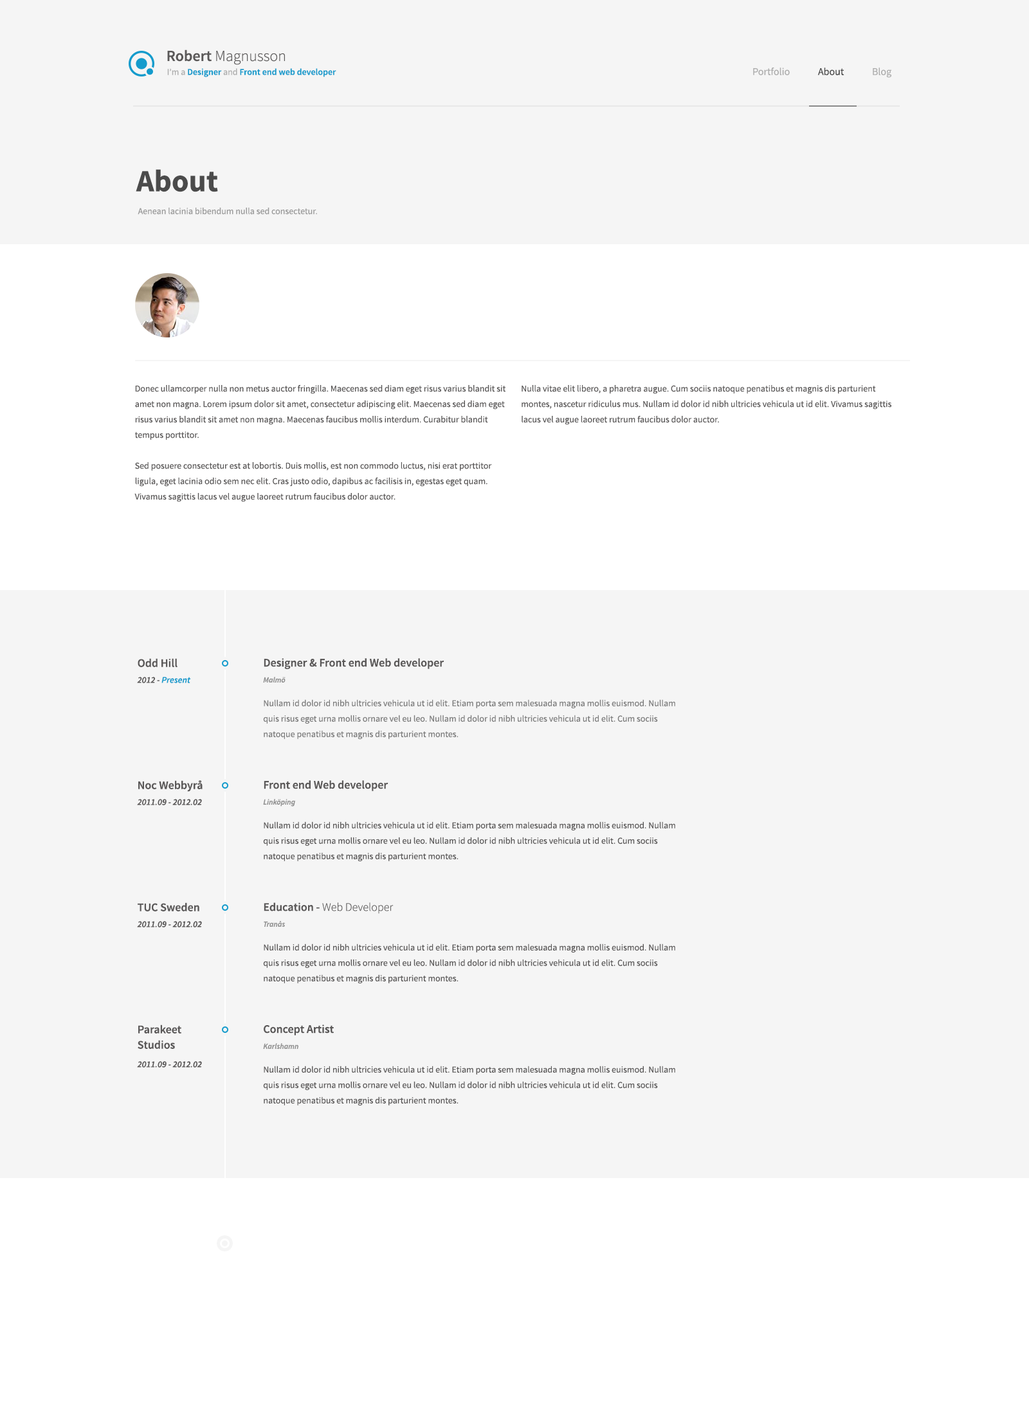
<style>
.page{position:relative;width:1029px;height:1414px;background:#f5f5f5}
.page>*{position:absolute;margin:0}
.t1{font:15.4px "SourceSansPro-Light";color:#5a5858}
.t2{font:15.4px "SourceSansPro-Semibold";color:#5a5858}
.t3{font:9px "SourceSansPro-Semibold";color:#149bcc}
.t4{font:9px "SourceSansPro-Regular";color:#adadad}
.t5{font:10.3px "SourceSansPro-Regular";color:#adadad}
.t6{font:10.3px "SourceSansPro-Regular";color:#4b4b4b}
.t7{font:30.9px "SourceSansPro-Bold";color:#4c4c4c}
.t8{font:9px "SourceSansPro-Regular";color:#9a9a9a}
.t9{font:9px/15.4px "SourceSansPro-Regular";color:#5a5858}
.t10{font:11.6px "SourceSansPro-Semibold";color:#5a5858}
.t11{font:9px "SourceSansPro-SemiboldIt";color:#149bcc}
.t12{font:9px "SourceSansPro-SemiboldIt";color:#5a5858}
.t13{font:7.7px "SourceSansPro-SemiboldIt";color:#909090}
.t14{font:9px/15.4px "SourceSansPro-Regular";color:#7b7b7b}
.t15{font:9px "SourceSansPro-SemiboldIt";color:#565454}
.t16{font:11.6px "SourceSansPro-Light";color:#5a5858}
.t17{font:11.6px/15.4px "SourceSansPro-Semibold";color:#5a5858}
</style>
<div class="page">
<p class="t1" style="left:167px;top:50px;width:118px;height:15px"><span class="t2">Robert </span>Magnusson</p>
<p class="t3" style="left:167px;top:68px;width:169px;height:9px"><span class="t4">I’m a </span>Designer<span class="t4"> and </span>Front end web developer</p>
<p class="t5" style="left:753px;top:68px;width:36px;height:7px">Portfolio</p>
<p class="t6" style="left:817px;top:68px;width:27px;height:7px">About</p>
<p class="t5" style="left:872px;top:68px;width:19px;height:10px">Blog</p>
<p class="t7" style="left:136px;top:169px;width:82px;height:23px">About</p>
<p class="t8" style="left:138px;top:208px;width:179px;height:7px">Aenean lacinia bibendum nulla sed consectetur.</p>
<p class="t9" style="left:134px;top:385px;width:372px;height:117px">Donec ullamcorper nulla non metus auctor fringilla. Maecenas sed diam eget risus varius blandit sit amet non magna. Lorem ipsum dolor sit amet, consectetur adipiscing elit. Maecenas sed diam eget risus varius blandit sit amet non magna. Maecenas faucibus mollis interdum. Curabitur blandit tempus porttitor.<br><br>Sed posuere consectetur est at lobortis. Duis mollis, est non commodo luctus, nisi erat porttitor ligula, eget lacinia odio sem nec elit. Cras justo odio, dapibus ac facilisis in, egestas eget quam. Vivamus sagittis lacus vel augue laoreet rutrum faucibus dolor auctor.</p>
<p class="t9" style="left:521px;top:385px;width:370px;height:40px">Nulla vitae elit libero, a pharetra augue. Cum sociis natoque penatibus et magnis dis parturient montes, nascetur ridiculus mus. Nullam id dolor id nibh ultricies vehicula ut id elit. Vivamus sagittis lacus vel augue laoreet rutrum faucibus dolor auctor.</p>
<p class="t10" style="left:138px;top:658px;width:39px;height:9px">Odd Hill</p>
<p class="t10" style="left:264px;top:658px;width:180px;height:11px">Designer &amp; Front end Web developer</p>
<p class="t11" style="left:137px;top:677px;width:54px;height:6px"><span class="t12">2012 - </span>Present</p>
<p class="t13" style="left:263px;top:677px;width:22px;height:6px">Malmö</p>
<p class="t14" style="left:263px;top:699px;width:412px;height:40px">Nullam id dolor id nibh ultricies vehicula ut id elit. Etiam porta sem malesuada magna mollis euismod. Nullam quis risus eget urna mollis ornare vel eu leo. Nullam id dolor id nibh ultricies vehicula ut id elit. Cum sociis natoque penatibus et magnis dis parturient montes.</p>
<p class="t10" style="left:138px;top:780px;width:65px;height:12px">Noc Webbyrå</p>
<p class="t10" style="left:264px;top:780px;width:124px;height:11px">Front end Web developer</p>
<p class="t12" style="left:137px;top:799px;width:65px;height:7px">2011.09 -<span class="t15"> 2012.02</span></p>
<p class="t13" style="left:263px;top:799px;width:32px;height:8px">Linköping</p>
<p class="t9" style="left:263px;top:822px;width:412px;height:39px">Nullam id dolor id nibh ultricies vehicula ut id elit. Etiam porta sem malesuada magna mollis euismod. Nullam quis risus eget urna mollis ornare vel eu leo. Nullam id dolor id nibh ultricies vehicula ut id elit. Cum sociis natoque penatibus et magnis dis parturient montes.</p>
<p class="t10" style="left:138px;top:903px;width:61px;height:9px">TUC Sweden</p>
<p class="t16" style="left:264px;top:903px;width:129px;height:11px"><span class="t10">Education - </span>Web Developer</p>
<p class="t12" style="left:137px;top:921px;width:65px;height:7px">2011.09 -<span class="t15"> 2012.02</span></p>
<p class="t13" style="left:264px;top:921px;width:21px;height:6px">Tranås</p>
<p class="t9" style="left:263px;top:944px;width:412px;height:40px">Nullam id dolor id nibh ultricies vehicula ut id elit. Etiam porta sem malesuada magna mollis euismod. Nullam quis risus eget urna mollis ornare vel eu leo. Nullam id dolor id nibh ultricies vehicula ut id elit. Cum sociis natoque penatibus et magnis dis parturient montes.</p>
<p class="t17" style="left:138px;top:1025px;width:43px;height:24px">Parakeet Studios</p>
<p class="t10" style="left:264px;top:1025px;width:70px;height:11px">Concept Artist</p>
<p class="t13" style="left:263px;top:1043px;width:35px;height:6px">Karlshamn</p>
<p class="t12" style="left:137px;top:1061px;width:65px;height:7px">2011.09 -<span class="t15"> 2012.02</span></p>
<p class="t9" style="left:263px;top:1066px;width:412px;height:40px">Nullam id dolor id nibh ultricies vehicula ut id elit. Etiam porta sem malesuada magna mollis euismod. Nullam quis risus eget urna mollis ornare vel eu leo. Nullam id dolor id nibh ultricies vehicula ut id elit. Cum sociis natoque penatibus et magnis dis parturient montes.</p>
</div>
